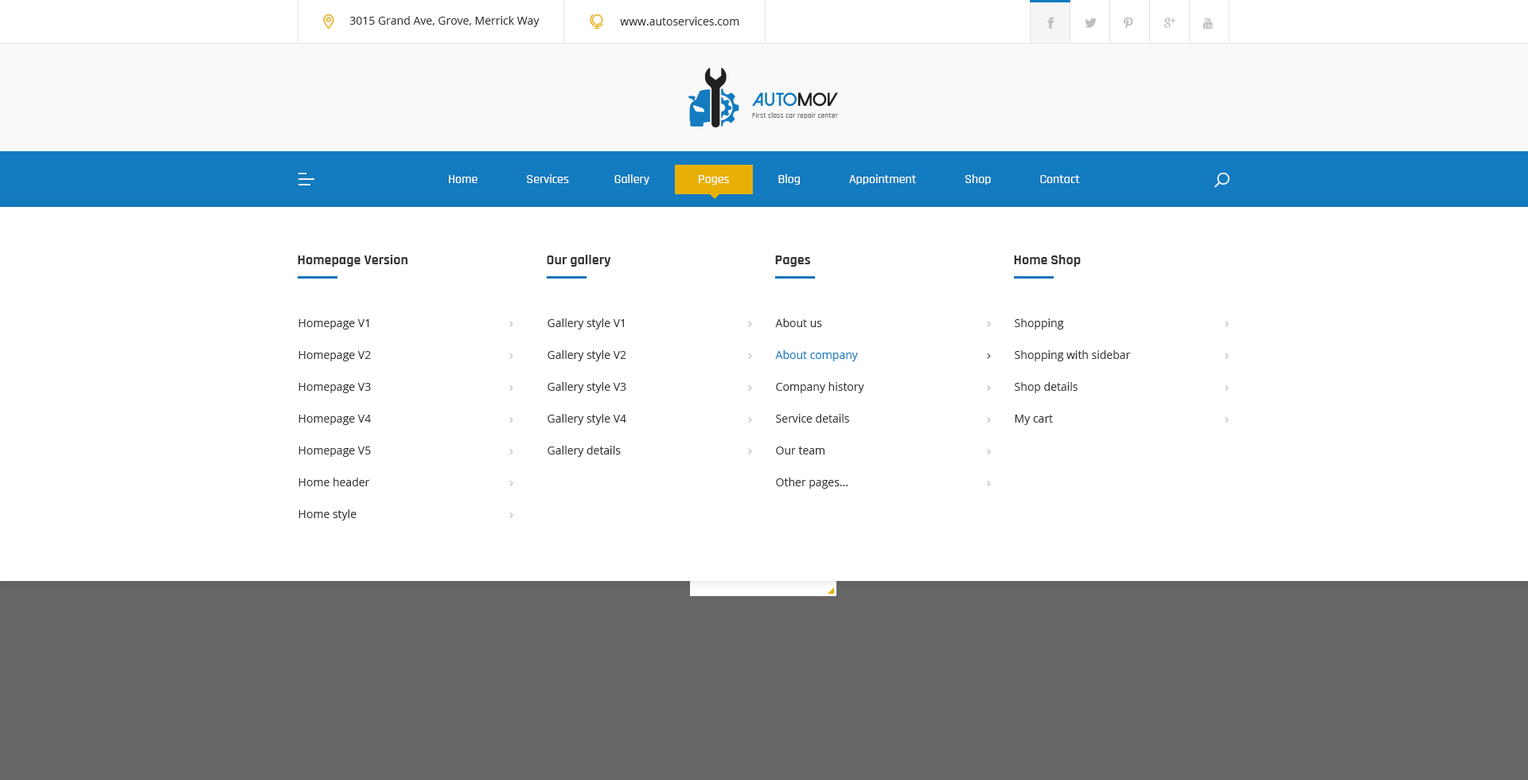
<style>
.page{position:relative;width:1528px;height:780px;background:#ffffff}
.page>*{position:absolute;margin:0}
.t1{font:11.1px "OpenSans";color:#343434}
.t2{font:12.7px "Rajdhani-Medium";color:#ffffff}
.t3{font:14.3px "Rajdhani-Bold";color:#343434}
.t4{font:11.1px/31.8px "OpenSans";color:#343434}
.t5{font:11.1px/31.8px "OpenSans";color:#137bc0}
</style>
<div class="page">
<p class="t1" style="left:349px;top:16px;width:191px;height:11px">3015 Grand Ave, Grove, Merrick Way</p>
<p class="t1" style="left:620px;top:17px;width:120px;height:8px">www.autoservices.com</p>
<p class="t2" style="left:449px;top:174px;width:631px;height:11px">Home               Services              Gallery               Pages               Blog               Appointment               Shop               Contact</p>
<p class="t3" style="left:298px;top:255px;width:110px;height:12px">Homepage Version</p>
<p class="t3" style="left:547px;top:255px;width:64px;height:12px">Our gallery</p>
<p class="t3" style="left:775px;top:256px;width:35px;height:11px">Pages</p>
<p class="t3" style="left:1014px;top:255px;width:67px;height:12px">Home Shop</p>
<p class="t4" style="left:299px;top:319px;width:73px;height:202px">Homepage V1<br>Homepage V2<br>Homepage V3<br>Homepage V4<br>Homepage V5<br>Home header<br>Home style</p>
<p class="t4" style="left:548px;top:318px;width:79px;height:139px">Gallery style V1<br>Gallery style V2<br>Gallery style V3<br>Gallery style V4<br>Gallery details</p>
<p class="t4" style="left:775px;top:318px;width:90px;height:171px">About us<br><span class="t5">About company<br></span>Company history<br>Service details<br>Our team<br>Other pages...</p>
<p class="t4" style="left:1015px;top:318px;width:116px;height:107px">Shopping<br>Shopping with sidebar<br>Shop details<br>My cart</p>
</div>
